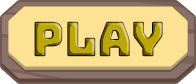
<style>
.page{position:relative;width:196px;height:84px;background:#fde294}
.page>*{position:absolute;margin:0}
.t1{font:48px "Bungee-Regular"}
</style>
<div class="page">
<p class="t1" style="left:34px;top:21px;width:129px;height:36px">play</p>
</div>
